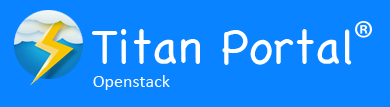
<style>
.page{position:relative;width:390px;height:107px;background:#0983ff}
.page>*{position:absolute;margin:0}
.t1{font:48px "Chalkboard";color:#ffffff}
.t2{font:18px "Calibri";color:#ffffff}
</style>
<div class="page">
<p class="t1" style="left:92px;top:29px;width:260px;height:36px">Titan Portal</p>
<p class="t2" style="left:93px;top:75px;width:77px;height:15px">Openstack</p>
</div>
